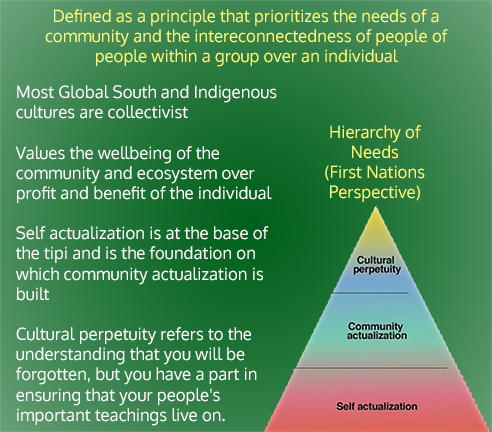
<style>
.page{position:relative;width:492px;height:432px}
.page>*{position:absolute;margin:0}
.t1{font:16.8px "Oxygen-Regular";color:#fffd79}
.t2{font:16.8px "Oxygen-Regular";color:#ffffff}
</style>
<div class="page">
<p class="t1" style="left:45px;top:9px;width:403px;height:58px;text-align:center">Defined as a principle that prioritizes the needs of a community and the intereconnectedness of people of people within a group over an individual</p>
<p class="t2" style="left:15px;top:85px;width:262px;height:341px">Most Global South and Indigenous <br>cultures are collectivist<br><br>Values the wellbeing of the community and ecosystem over profit and benefit of the individual<br><br>Self actualization is at the base of the tipi and is the foundation on which community actualization is built<br><br>Cultural perpetuity refers to the understanding that you will be forgotten, but you have a part in ensuring that your people's important teachings live on.</p>
<p class="t1" style="left:325px;top:125px;width:100px;height:77px;text-align:center">Hierarchy of Needs<br>(First Nations Perspective)</p>
</div>
